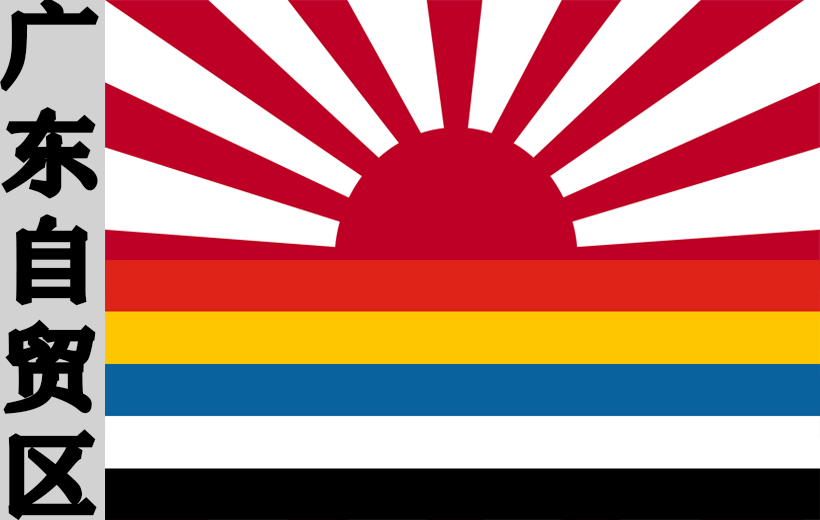
<style>
.page{position:relative;width:820px;height:520px;background:#ffffff}
.page>*{position:absolute;margin:0}
.t1{font:89.7px "SimSun";color:#000000;font-weight:bold;scale:1.14 1}
</style>
<div class="page">
<p class="t1" style="left:0px;top:0px;width:99px;height:521px">广<br>东<br>自<br>贸<br>区</p>
</div>
